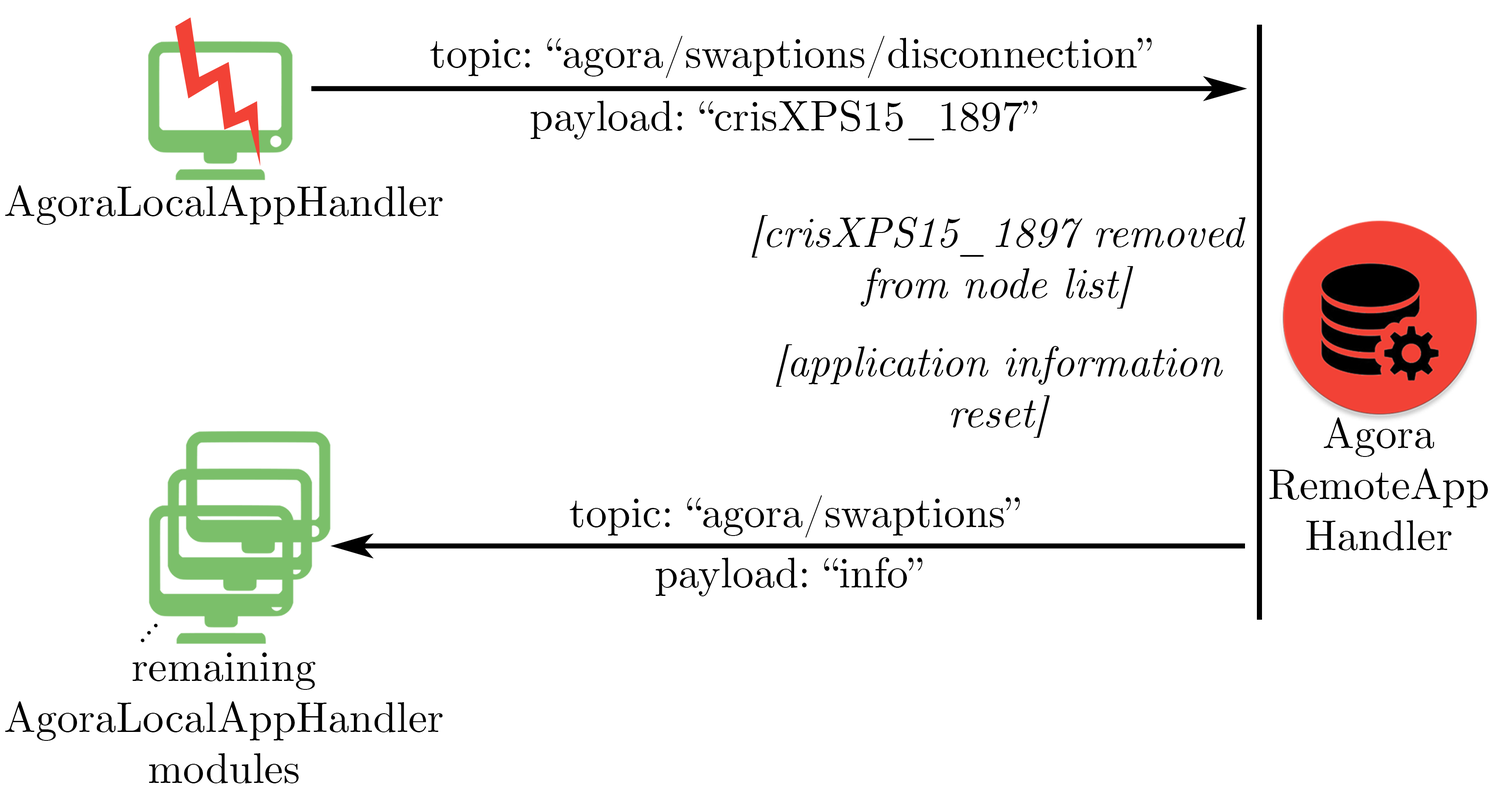
<style>
.page{position:relative;width:1507px;height:791px;background:#ffffff}
.page>*{position:absolute;margin:0}
.t1{font:42.5px "CMUSerif-Roman";color:#000000}
.t2{font:42.5px "CMUSerif-Italic";color:#000000}
.t3{font:35.4px "CMUSerif-Roman";color:#000000}
</style>
<div class="page">
<p class="t1" style="left:430px;top:36px;width:722px;height:42px">topic: “agora/swaptions/disconnection”</p>
<p class="t1" style="left:530px;top:100px;width:507px;height:40px">payload: “crisXPS15_1897”</p>
<p class="t1" style="left:5px;top:185px;width:438px;height:40px">AgoraLocalAppHandler</p>
<p class="t2" style="left:751px;top:215px;width:494px;height:94px;text-align:center">[crisXPS15_1897 removed<br>from node list]</p>
<p class="t2" style="left:776px;top:344px;width:447px;height:94px;text-align:center">[application information<br>reset]</p>
<p class="t1" style="left:1269px;top:418px;width:219px;height:133px;text-align:center">Agora<br>RemoteApp<br>Handler</p>
<p class="t1" style="left:569px;top:495px;width:451px;height:43px">topic: “agora/swaptions”</p>
<p class="t1" style="left:655px;top:558px;width:267px;height:39px">payload: “info”</p>
<p class="t3" style="left:141px;top:624px;width:17px;height:19px;rotate:-48deg">...</p>
<p class="t1" style="left:5px;top:653px;width:438px;height:131px;text-align:center">remaining<br>AgoraLocalAppHandler<br>modules</p>
</div>
